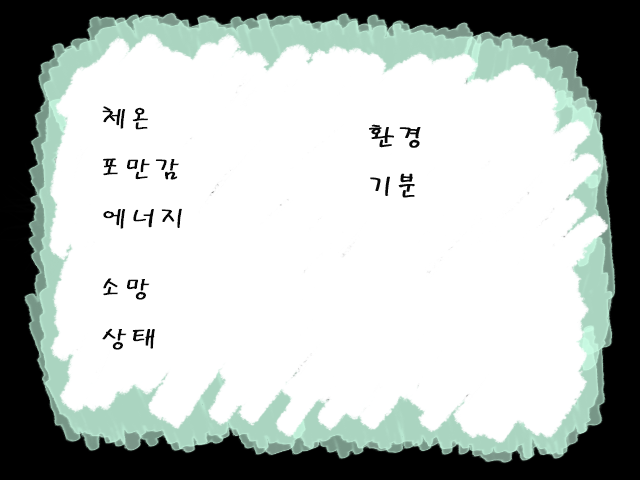
<style>
.page{position:relative;width:640px;height:480px;background:#ffffff}
.page>*{position:absolute;margin:0}
.t1{font:25px/50px "PyunjiR-HM";letter-spacing:0.08em;color:#080808;font-weight:bold;scale:1.2 1}
.t2{font:25px/70px "PyunjiR-HM";letter-spacing:0.08em;color:#080808;font-weight:bold;scale:1.2 1}
</style>
<div class="page">
<p class="t1" style="left:102px;top:106px;width:80px;height:244px">체온<br>포만감<br>에너지<br><span class="t2">소망<br></span>상태</p>
<p class="t1" style="left:369px;top:124px;width:52px;height:74px">환경<br>기분</p>
</div>
